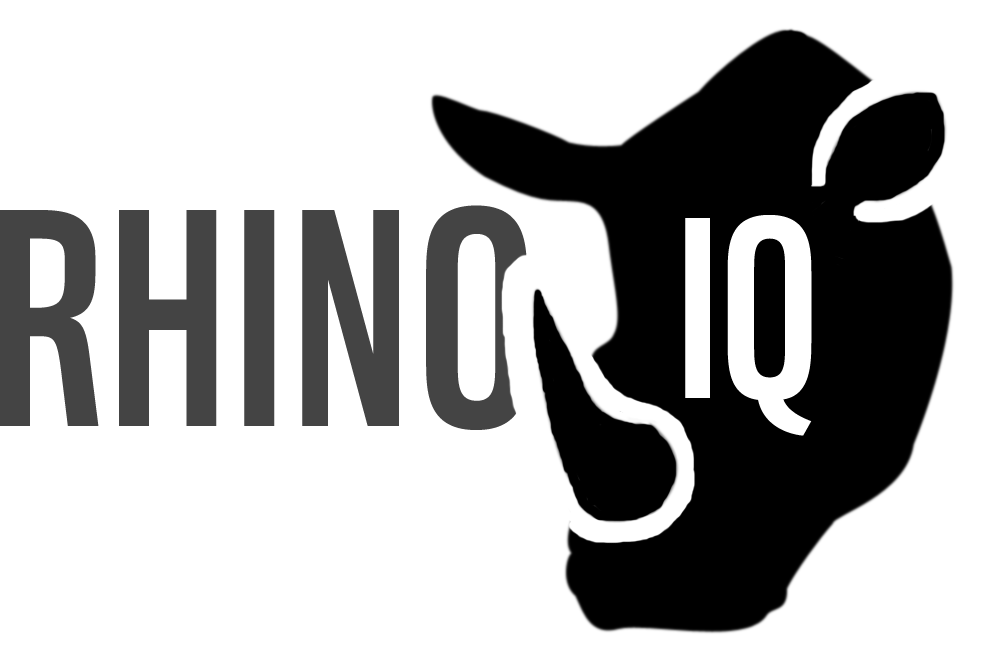
<style>
.page{position:relative;width:983px;height:662px;background:#ffffff}
.page>*{position:absolute;margin:0}
.t1{font:300px "WWF";letter-spacing:0.02em;color:#444444}
.t2{font:250px "WWF";color:#ffffff}
</style>
<div class="page">
<p class="t1" style="left:0px;top:205px;width:527px;height:225px">RHINO</p>
<p class="t2" style="left:685px;top:215px;width:127px;height:221px">IQ</p>
</div>
